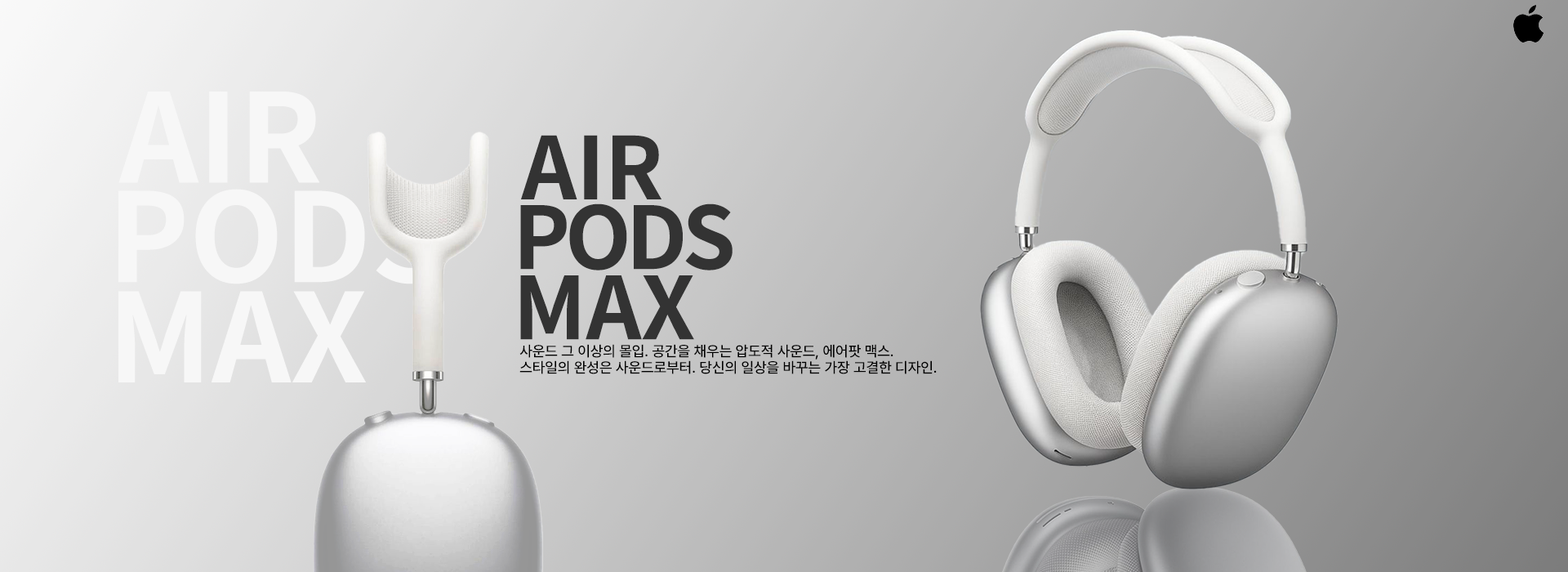
<style>
.page{position:relative;width:1568px;height:572px}
.page>*{position:absolute;margin:0}
.t1{font:122.7px "NotoSansKR-Bold";color:#f7f7f7}
.t2{font:85.9px "NotoSansKR-Bold";color:#333333}
.t3{font:122.7px/100.4px "NotoSansKR-Bold";color:#f7f7f7}
.t4{font:85.9px/70.3px "NotoSansKR-Bold";letter-spacing:-0.06em;color:#333333}
.t5{font:85.9px/70.3px "NotoSansKR-Bold";color:#333333}
.t6{font:14.7px "Pretendard-Medium";color:#000000}
</style>
<div class="page">
<p class="t1" style="left:118px;top:91px;width:202px;height:92px">AIR</p>
<p class="t2" style="left:521px;top:135px;width:141px;height:64px">AIR</p>
<p class="t3" style="left:118px;top:189px;width:325px;height:193px">PODS<br>MAX</p>
<p class="t4" style="left:520px;top:203px;width:213px;height:137px"><span class="t5"><br></span>PODS<br><span class="t5">MAX</span></p>
<p class="t6" style="left:519px;top:344px;width:374px;height:15px">사운드 그 이상의 몰입. 공간을 채우는 압도적 사운드, 에어팟 맥스.</p>
<p class="t6" style="left:519px;top:360px;width:418px;height:14px">스타일의 완성은 사운드로부터. 당신의 일상을 바꾸는 가장 고결한 디자인.</p>
</div>
